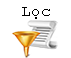
<style>
.page{position:relative;width:71px;height:58px;background:#ffffff}
.page>*{position:absolute;margin:0}
.t1{font:12px "CourierNewPSMT";color:#000000}
</style>
<div class="page">
<p class="t1" style="left:22px;top:7px;width:28px;height:12px">Lọc</p>
</div>
